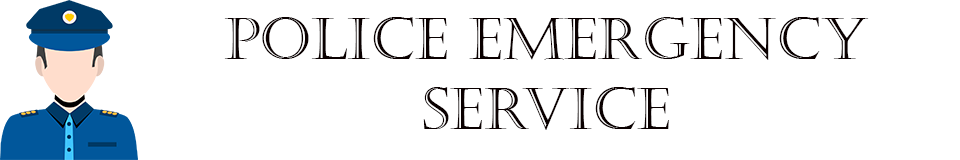
<style>
.page{position:relative;width:960px;height:160px;background:#ffffff}
.page>*{position:absolute;margin:0}
.t1{font:58.3px "Castellar";color:#0a0000}
</style>
<div class="page">
<p class="t1" style="left:224px;top:17px;width:645px;height:113px;text-align:center">Police Emergency<br>service</p>
</div>
